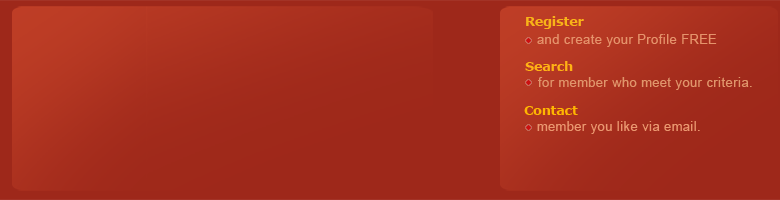
<style>
.page{position:relative;width:780px;height:200px;background:#9e281a}
.page>*{position:absolute;margin:0}
.t1{font:12.5px "Verdana-Bold";color:#f8b318}
.t2{font:12.5px "ArialMT";letter-spacing:0.05em;color:#e5936b}
.t3{font:12.5px "Verdana-Bold";color:#ffb214}
.t4{font:12.5px "ArialMT";letter-spacing:0.05em;color:#e0956b}
.t5{font:12.5px "Verdana-Bold";color:#feb501}
.t6{font:12.5px "ArialMT";letter-spacing:0.05em;color:#ea976f}
</style>
<div class="page">
<p class="t1" style="left:526px;top:16px;width:58px;height:13px">Register</p>
<p class="t2" style="left:537px;top:34px;width:180px;height:13px">and create your Profile FREE</p>
<p class="t3" style="left:525px;top:61px;width:48px;height:10px">Search</p>
<p class="t4" style="left:538px;top:77px;width:214px;height:13px">for member who meet your criteria.</p>
<p class="t5" style="left:524px;top:106px;width:54px;height:9px">Contact</p>
<p class="t6" style="left:537px;top:121px;width:163px;height:13px">member you like via email.</p>
</div>
